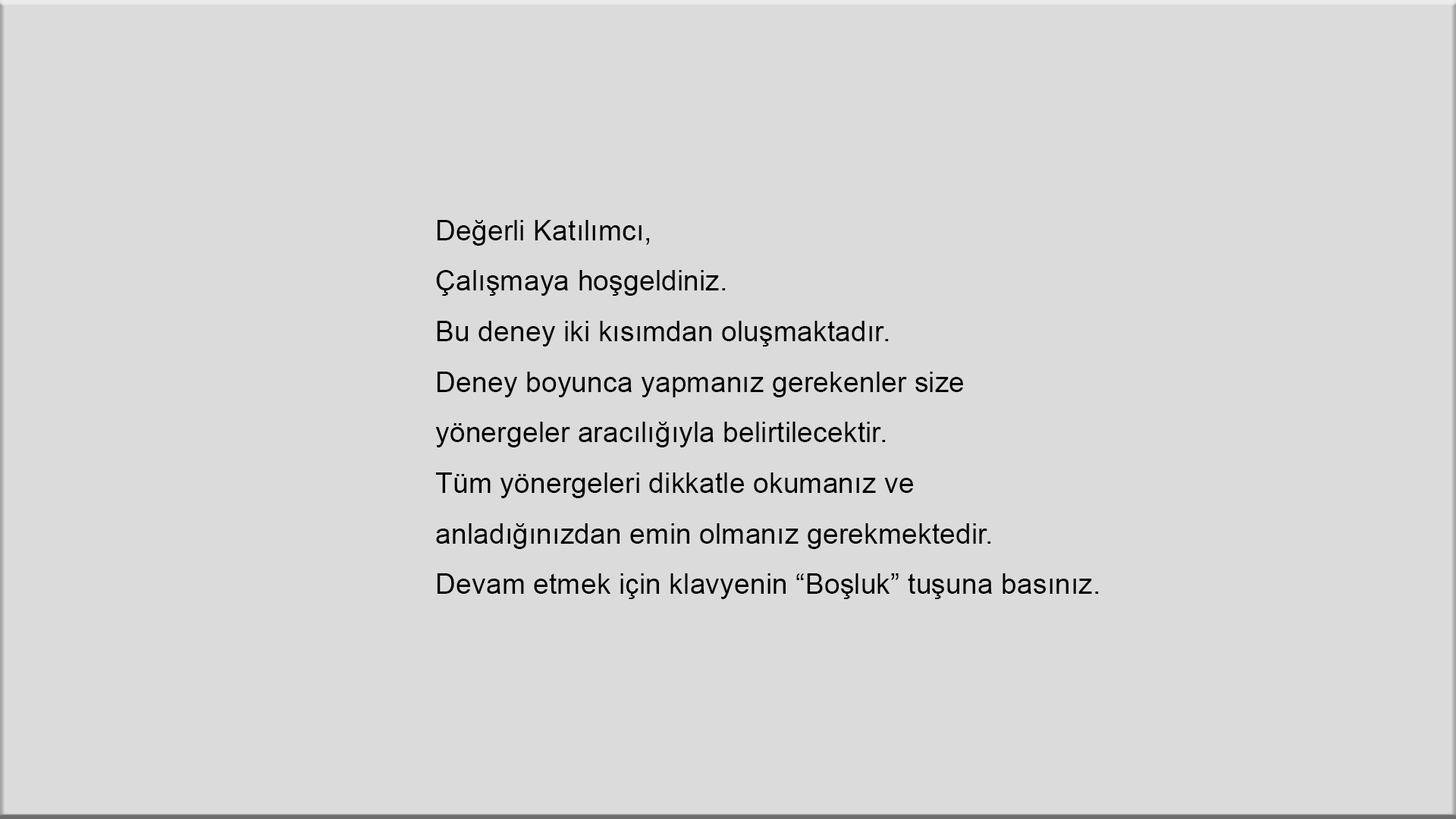
<style>
.page{position:relative;width:1456px;height:819px;background:#dbdbdb}
.page>*{position:absolute;margin:0}
.t1{font:28.4px/50.6px "ArialMT";color:#000000}
</style>
<div class="page">
<p class="t1" style="left:435px;top:220px;width:664px;height:379px">Değerli Katılımcı,<br>Çalışmaya hoşgeldiniz.<br>Bu deney iki kısımdan oluşmaktadır.<br>Deney boyunca yapmanız gerekenler size<br>yönergeler aracılığıyla belirtilecektir.<br>Tüm yönergeleri dikkatle okumanız ve <br>anladığınızdan emin olmanız gerekmektedir.<br>Devam etmek için klavyenin “Boşluk” tuşuna basınız.</p>
</div>
